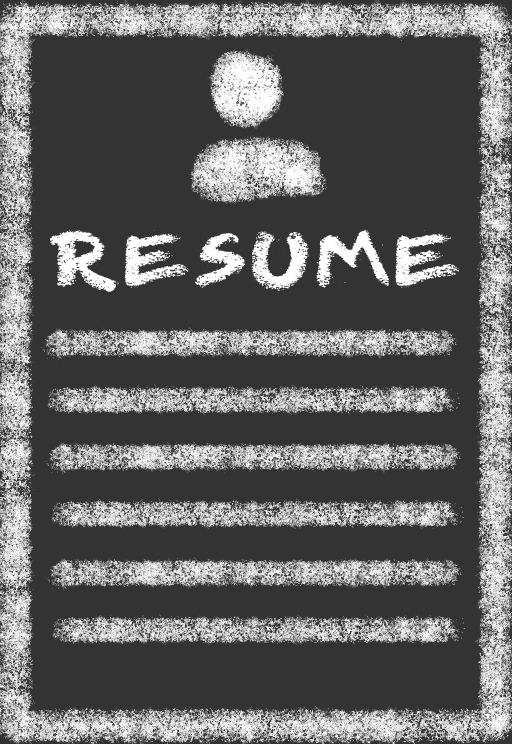
<style>
.page{position:relative;width:512px;height:744px;background:#333333}
.page>*{position:absolute;margin:0}
.t1{font:61.9px "RightChalk";letter-spacing:0.06em;color:#ffffff;scale:1.27 1}
</style>
<div class="page">
<p class="t1" style="left:50px;top:229px;width:409px;height:64px">RESUME</p>
</div>
